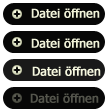
<style>
.page{position:relative;width:108px;height:112px;background:#070707}
.page>*{position:absolute;margin:0}
.t1{font:12px "Tahoma";color:#f1f3da;font-weight:bold}
.t2{font:12px "Tahoma";color:#f5f7df;font-weight:bold}
.t3{font:12px "Tahoma";color:#54554c;font-weight:bold}
</style>
<div class="page">
<p class="t1" style="left:31px;top:8px;width:69px;height:10px">Datei öffnen</p>
<p class="t1" style="left:31px;top:38px;width:69px;height:10px">Datei öffnen</p>
<p class="t2" style="left:32px;top:66px;width:69px;height:10px">Datei öffnen</p>
<p class="t3" style="left:30px;top:93px;width:69px;height:10px">Datei öffnen</p>
</div>
